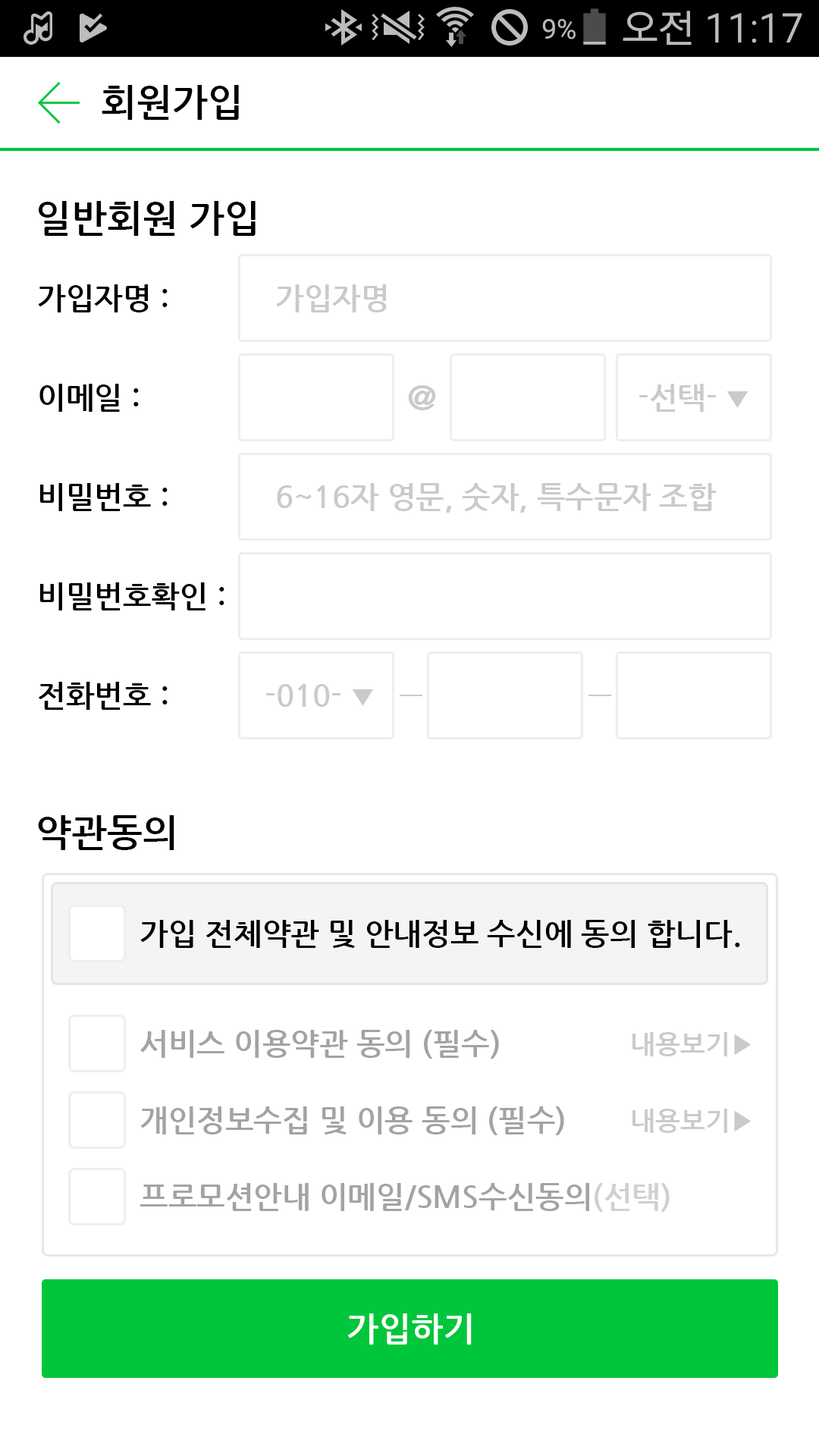
<style>
.page{position:relative;width:819px;height:1456px;background:#ffffff}
.page>*{position:absolute;margin:0}
.t1{font:37.9px "NanumGothicBold";color:#000000}
.t2{font:30.3px "NanumGothicBold";color:#000000}
.t3{font:30.3px "NanumGothicBold";color:#cacaca}
.t4{font:34.1px "NanumGothicBold";color:#cacaca}
.t5{font:26.5px "NanumGothicBold";color:#cacaca}
.t6{font:30.3px "NanumGothicBold";color:#a3a3a3}
.t7{font:30.3px "NanumGothicBold";color:#999999}
.t8{font:34.1px "NanumGothicBold";color:#ffffff}
</style>
<div class="page">
<p class="t1" style="left:102px;top:85px;width:137px;height:35px">회원가입</p>
<p class="t1" style="left:39px;top:201px;width:217px;height:35px">일반회원 가입</p>
<p class="t2" style="left:38px;top:284px;width:130px;height:28px">가입자명 :</p>
<p class="t3" style="left:276px;top:284px;width:111px;height:28px">가입자명</p>
<p class="t2" style="left:39px;top:384px;width:100px;height:28px">이메일 :</p>
<p class="t4" style="left:408px;top:385px;width:28px;height:25px">@</p>
<p class="t3" style="left:639px;top:384px;width:109px;height:28px">-선택- <span class="t5">▼</span></p>
<p class="t2" style="left:39px;top:483px;width:129px;height:28px">비밀번호 :</p>
<p class="t3" style="left:277px;top:483px;width:440px;height:30px">6~16자 영문, 숫자, 특수문자 조합</p>
<p class="t2" style="left:39px;top:582px;width:185px;height:28px">비밀번호확인 :</p>
<p class="t2" style="left:39px;top:682px;width:129px;height:28px">전화번호 :</p>
<p class="t3" style="left:266px;top:684px;width:108px;height:23px">-010- <span class="t5">▼</span></p>
<p class="t1" style="left:38px;top:815px;width:136px;height:35px">약관동의</p>
<p class="t2" style="left:140px;top:920px;width:600px;height:28px">가입 전체약관 및 안내정보 수신에 동의 합니다.</p>
<p class="t6" style="left:140px;top:1030px;width:359px;height:29px">서비스 이용약관 동의 (필수)</p>
<p class="t5" style="left:632px;top:1032px;width:119px;height:24px">내용보기▶</p>
<p class="t6" style="left:140px;top:1106px;width:424px;height:29px">개인정보수집 및 이용 동의 (필수)</p>
<p class="t5" style="left:632px;top:1109px;width:119px;height:24px">내용보기▶</p>
<p class="t2" style="left:140px;top:1183px;width:530px;height:29px;opacity:0.5">프로모션안내 이메일/SMS수신동의<span class="t7">(선택)</span></p>
<p class="t8" style="left:347px;top:1313px;width:125px;height:32px">가입하기</p>
</div>
